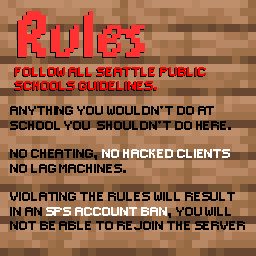
<style>
.page{position:relative;width:256px;height:256px}
.page>*{position:absolute;margin:0}
.t1{font:72px "DPComicRegular";color:#ff3131}
.t2{font:12px "Small-Pixel";color:#ff0000}
.t3{font:12px "Small-Pixel";color:#000000}
.t4{font:12px "Small-Pixel";color:#ffffff}
</style>
<div class="page">
<p class="t1" style="left:18px;top:11px;width:127px;height:46px">Rules</p>
<p class="t2" style="left:15px;top:67px;width:191px;height:23px">Follow All Seattle public<br>Schools guidelines.</p>
<p class="t3" style="left:10px;top:106px;width:235px;height:124px">Anything you wouldn't do at<br>school you  shouldn't do here.<br><br>No cheating, <span class="t4">no hacked clients<br></span>No Lag Machines.<br><br>Violating the rules will result<br>in an <span class="t4">SPS account ban</span>, you will<br>not be able to rejoin the server</p>
</div>
